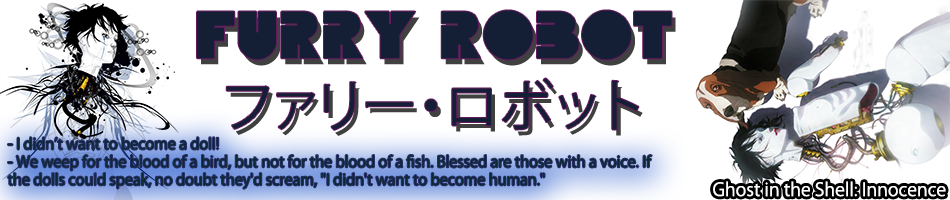
<style>
.page{position:relative;width:950px;height:200px;background:#ffffff}
.page>*{position:absolute;margin:0}
.t1{font:55.7px "FattiPattiFLF";color:#141f36}
.t2{font:55.7px "KozGoPr6N-Regular";color:#141f36}
.t3{font:14.9px "KozGoPr6N-Regular";color:#0b2932}
.t4{font:18px "KozGoPr6N-Regular";color:#ffffff}
</style>
<div class="page">
<p class="t1" style="left:197px;top:10px;width:475px;height:50px">Furry Robot</p>
<p class="t2" style="left:226px;top:78px;width:413px;height:52px">ファリー・ロボット</p>
<p class="t3" style="left:8px;top:137px;width:644px;height:52px">- I didn’t want to become a doll!<br>- We weep for the blood of a bird, but not for the blood of a fish. Blessed are those with a voice. If the dolls could speak, no doubt they'd scream, "I didn't want to become human."</p>
<p class="t4" style="left:713px;top:181px;width:233px;height:16px">Ghost in the Shell: Innocence</p>
</div>
